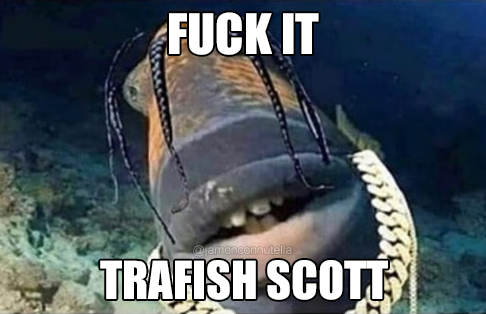
<style>
.page{position:relative;width:486px;height:314px}
.page>*{position:absolute;margin:0}
.t1{font:51.4px "Impact";color:#ffffff}
.t2{font:12px "ArialMT";color:#d2beb7}
.t3{font:48.2px "Impact";color:#ffffff}
</style>
<div class="page">
<p class="t1" style="left:169px;top:12px;width:150px;height:43px">FUCK IT</p>
<p class="t2" style="left:193px;top:245px;width:99px;height:12px">@jamonconnutella</p>
<p class="t3" style="left:100px;top:260px;width:288px;height:40px">TRAFISH SCOTT</p>
</div>
